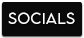
<style>
.page{position:relative;width:84px;height:38px;background:#0a0a0a}
.page>*{position:absolute;margin:0}
.t1{font:14px "LEMONMILK-Light";letter-spacing:0.05em;color:#ffffff}
</style>
<div class="page">
<p class="t1" style="left:8px;top:12px;width:67px;height:12px">SOCIALS</p>
</div>
